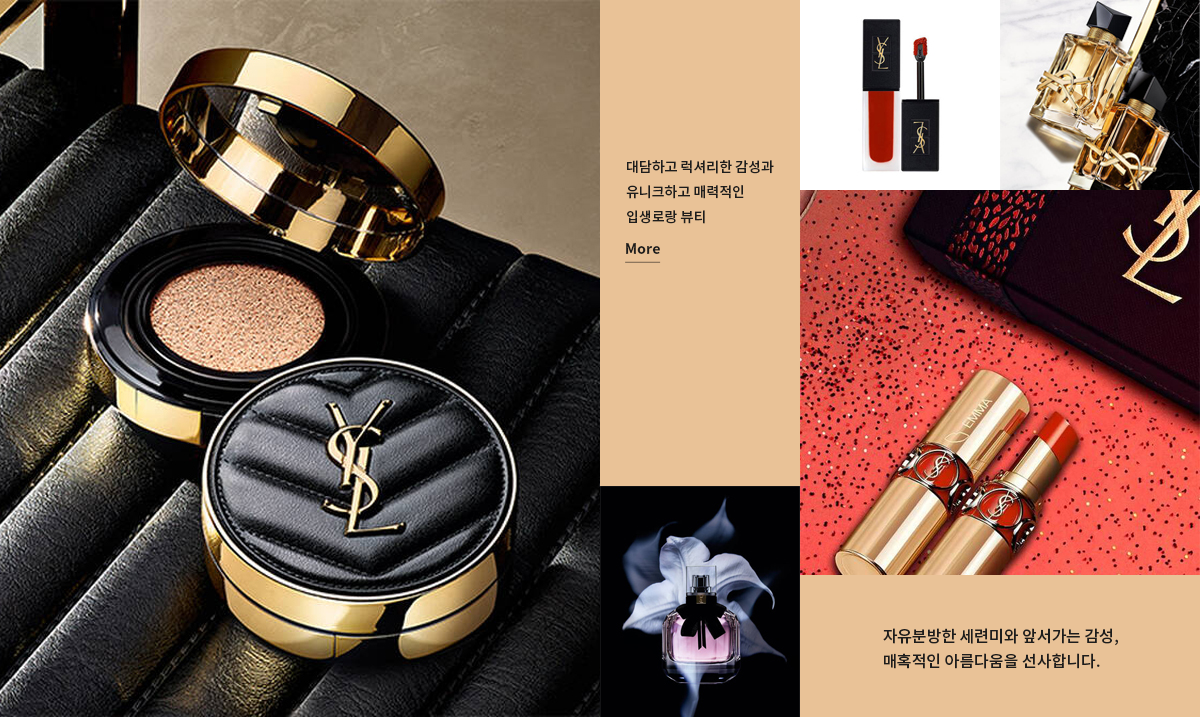
<style>
.page{position:relative;width:1200px;height:717px}
.page>*{position:absolute;margin:0}
.t1{font:14px/25px "NotoSansKR-Medium";color:#1d1d1d}
.t2{font:14px "NotoSansKR-Bold";color:#1d1d1d;text-decoration:underline}
.t3{font:16px/25px "NotoSansKR-Medium";color:#1d1d1d}
</style>
<div class="page">
<p class="t1" style="left:626px;top:160px;width:148px;height:64px">대담하고 럭셔리한 감성과 <br>유니크하고 매력적인<br>입생로랑 뷰티</p>
<p class="t2" style="left:625px;top:243px;width:36px;height:20px">More</p>
<p class="t3" style="left:883px;top:628px;width:235px;height:41px">자유분방한 세련미와 앞서가는 감성,<br>매혹적인 아름다움을 선사합니다.</p>
</div>
